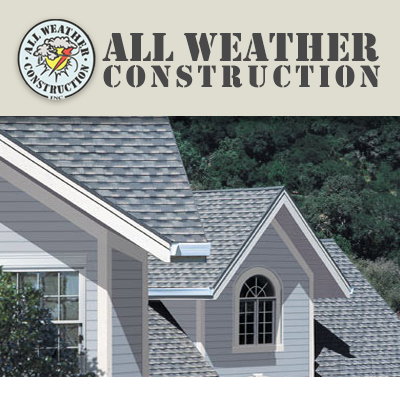
<style>
.page{position:relative;width:400px;height:400px}
.page>*{position:absolute;margin:0}
.t1{font:42px "Stencil";color:#494949}
.t2{font:32.2px "Stencil";letter-spacing:0.12em;color:#494949}
</style>
<div class="page">
<p class="t1" style="left:102px;top:33px;width:277px;height:29px">ALL WEATHER</p>
<p class="t2" style="left:103px;top:65px;width:277px;height:23px">CONSTRUCTION</p>
</div>
